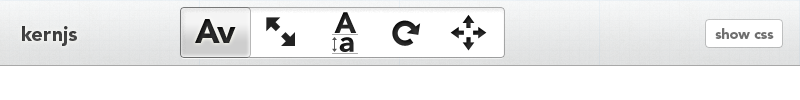
<style>
.page{position:relative;width:800px;height:100px;background:#ffffff}
.page>*{position:absolute;margin:0}
.t1{font:29.1px "AvenirLTStd-Black";color:#333333}
.t2{font:20px "AvenirLTStd-Black";color:#333333}
.t3{font:33.3px "AvenirLTStd-Black";color:#333333}
.t4{font:14px "AvenirLTStd-Black";color:#6f6f6f}
</style>
<div class="page">
<p class="t1" style="left:334px;top:12px;width:23px;height:21px">A</p>
<p class="t2" style="left:22px;top:26px;width:55px;height:20px;opacity:0.8">kernjs</p>
<p class="t3" style="left:195px;top:19px;width:41px;height:24px">Av</p>
<p class="t4" style="left:715px;top:28px;width:59px;height:11px">show css</p>
<p class="t1" style="left:339px;top:37px;width:15px;height:15px">a</p>
</div>
